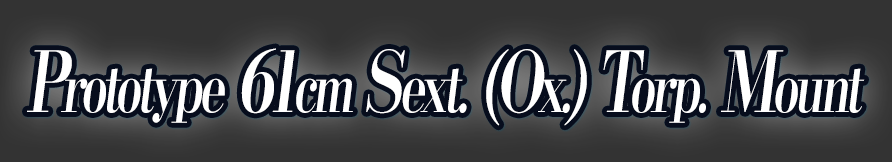
<style>
.page{position:relative;width:892px;height:162px;background:#333333}
.page>*{position:absolute;margin:0}
.t1{font:67.2px "KochoStd-Heavy";letter-spacing:-0.08em;color:#ffffff;font-style:italic;scale:0.72 1}
.t2{font:84px "KochoStd-Heavy";letter-spacing:-0.08em;color:#ffffff;font-style:italic;scale:0.72 1}
</style>
<div class="page">
<p class="t1" style="left:27px;top:48px;width:838px;height:78px"><span class="t2">P</span>rototype<span class="t2"> 61</span>cm <span class="t2">S</span>ext.<span class="t2"> (O</span>x.<span class="t2">) T</span>orp.<span class="t2"> M</span>ount</p>
</div>
